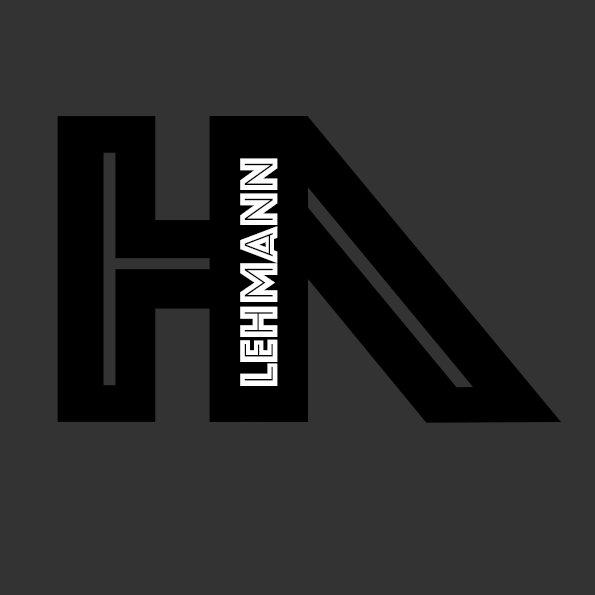
<style>
.page{position:relative;width:595px;height:595px;background:#333333}
.page>*{position:absolute;margin:0}
.t1{font:55.4px "Phosphate-Inline";color:#ffffff}
</style>
<div class="page">
<p class="t1" style="left:240px;top:158px;width:38px;height:228px;rotate:-90deg">Lehmann</p>
</div>
